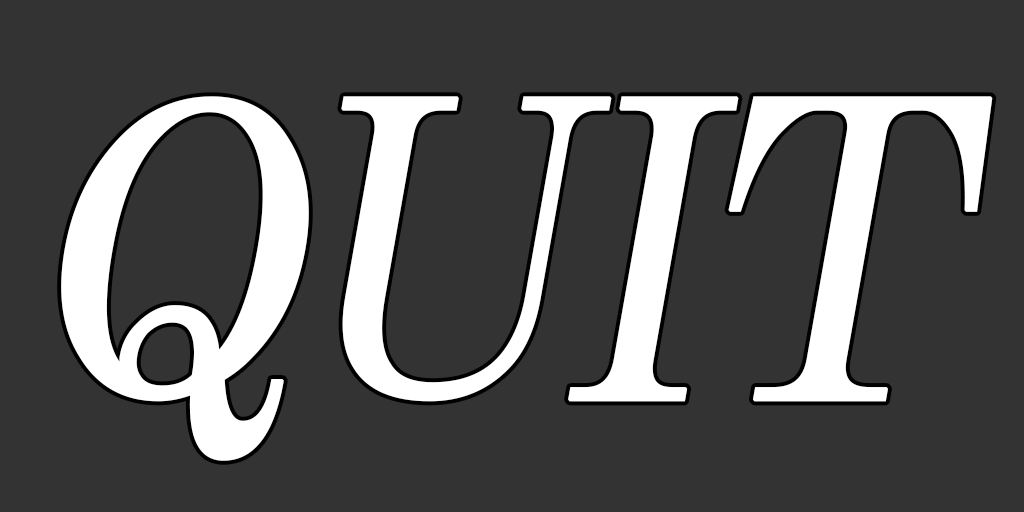
<style>
.page{position:relative;width:1024px;height:512px;background:#333333}
.page>*{position:absolute;margin:0}
.t1{font:411.1px "HGSMinchoB";letter-spacing:-0.07em;color:#ffffff;font-weight:bold;font-style:italic}
</style>
<div class="page">
<p class="t1" style="left:61px;top:96px;width:932px;height:365px">QUIT</p>
</div>
